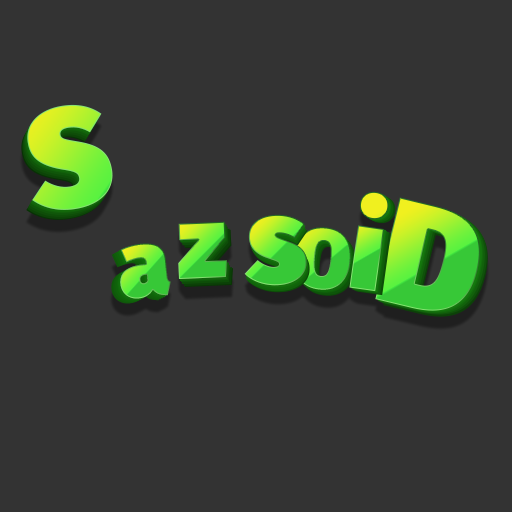
<style>
.page{position:relative;width:512px;height:512px;background:#333333}
.page>*{position:absolute;margin:0}
.t1{font:140.3px "FiraSans-Ultra"}
.t2{font:116.9px "FiraSans-Ultra"}
.t3{font:149.7px "FiraSans-Ultra"}
.t4{font:102.9px "FiraSans-Ultra"}
.t5{font:121.6px "FiraSans-Ultra"}
.t6{font:84.2px "FiraSans-Ultra"}
.t7{font:93.5px "FiraSans-Ultra"}
</style>
<div class="page">
<p class="t1" style="left:27px;top:104px;width:86px;height:106px;rotate:-9deg">S</p>
<p class="t2" style="left:349px;top:191px;width:40px;height:101px;rotate:8deg">i</p>
<p class="t3" style="left:375px;top:197px;width:105px;height:114px;rotate:14deg">D</p>
<p class="t4" style="left:178px;top:221px;width:49px;height:58px;rotate:-3deg">z</p>
<p class="t5" style="left:244px;top:214px;width:63px;height:72px;rotate:1deg">s</p>
<p class="t6" style="left:294px;top:227px;width:57px;height:63px;rotate:5deg">O</p>
<p class="t7" style="left:120px;top:243px;width:51px;height:56px;rotate:-5deg">a</p>
</div>
